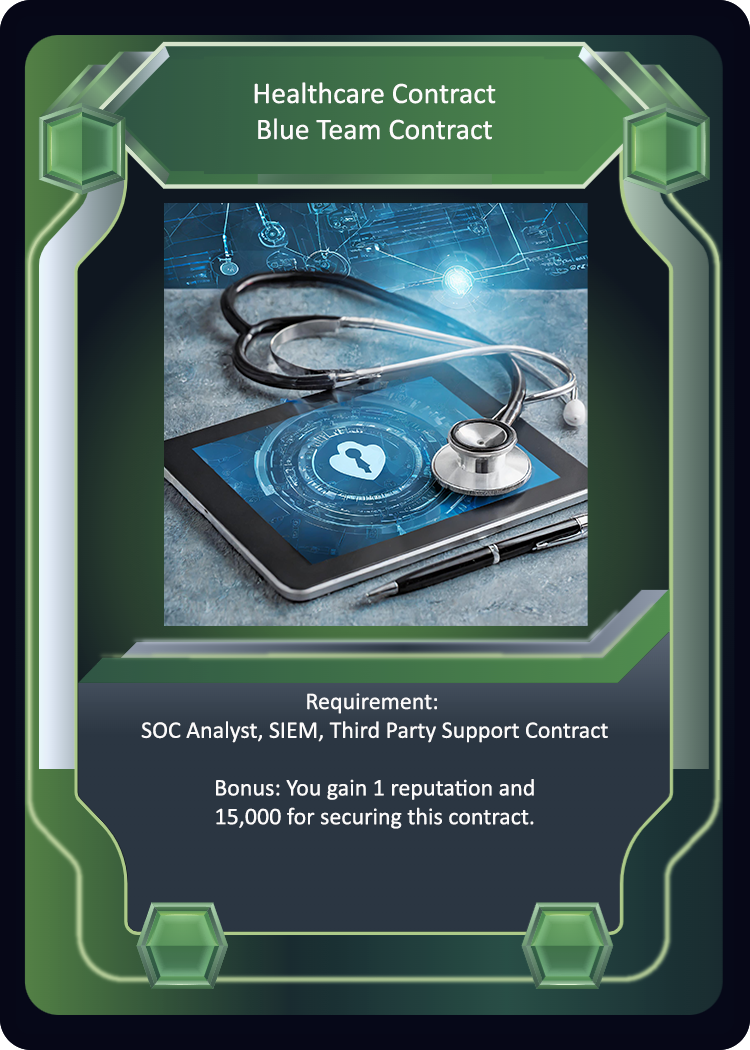
<style>
.page{position:relative;width:750px;height:1050px}
.page>*{position:absolute;margin:0}
.t1{font:30px "Calibri";color:#fcfbfb}
.t2{font:24px "Calibri";color:#fcfbfb}
</style>
<div class="page">
<p class="t1" style="left:254px;top:82px;width:242px;height:58px;text-align:center">Healthcare Contract<br>Blue Team Contract</p>
<p class="t2" style="left:141px;top:693px;width:467px;height:136px;text-align:center">Requirement: <br>SOC Analyst, SIEM, Third Party Support Contract<br><br>Bonus: You gain 1 reputation and<br>15,000 for securing this contract.</p>
</div>
